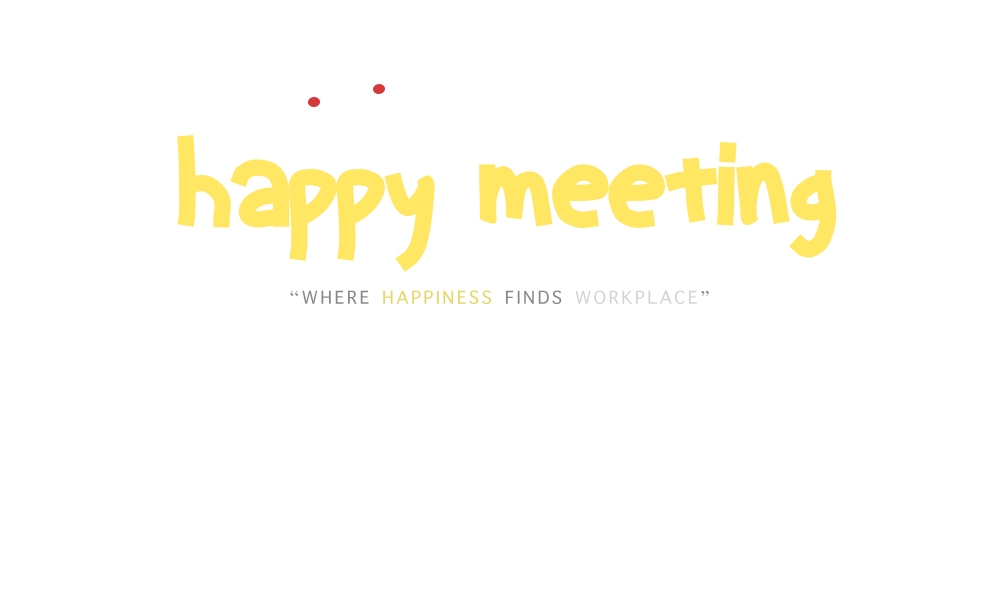
<style>
.page{position:relative;width:1000px;height:600px;background:#ffffff}
.page>*{position:absolute;margin:0}
.t1{font:130px "Animated";color:#ffe763}
.t2{font:130px "Animated";color:#ffffff}
.t3{font:24px "AppleSymbols";letter-spacing:0.1em;color:#e5d763}
.t4{font:24px "AppleSymbols";letter-spacing:0.1em;color:#888888}
.t5{font:24px "AppleSymbols";letter-spacing:0.1em;color:#d3d3d3}
</style>
<div class="page">
<p class="t1" style="left:177px;top:135px;width:660px;height:137px">happy<span class="t2">-</span>meeting</p>
<p class="t3" style="left:290px;top:290px;width:419px;height:14px"><span class="t4">“WHERE </span>HAPPINESS<span class="t4"> FINDS </span><span class="t5">WORKPLACE</span><span class="t4">”</span></p>
</div>
